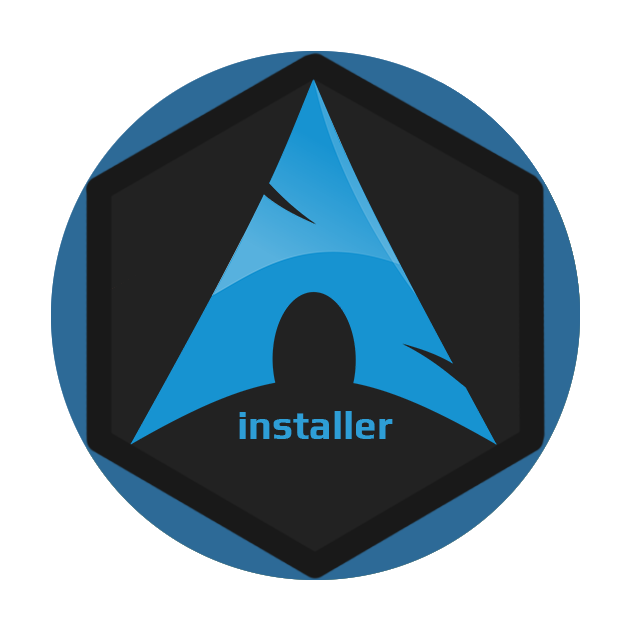
<style>
.page{position:relative;width:630px;height:630px;background:#ffffff}
.page>*{position:absolute;margin:0}
.t1{font:40px "Play-Bold";color:#2e9ed6}
</style>
<div class="page">
<p class="t1" style="left:239px;top:411px;width:154px;height:28px">installer</p>
</div>
